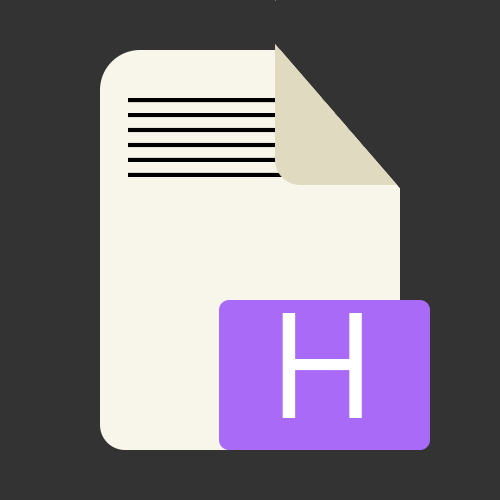
<style>
.page{position:relative;width:500px;height:500px;background:#333333}
.page>*{position:absolute;margin:0}
.t1{font:150px "MicrosoftTaiLe";color:#ffffff}
</style>
<div class="page">
<p class="t1" style="left:282px;top:313px;width:80px;height:105px">H</p>
</div>
